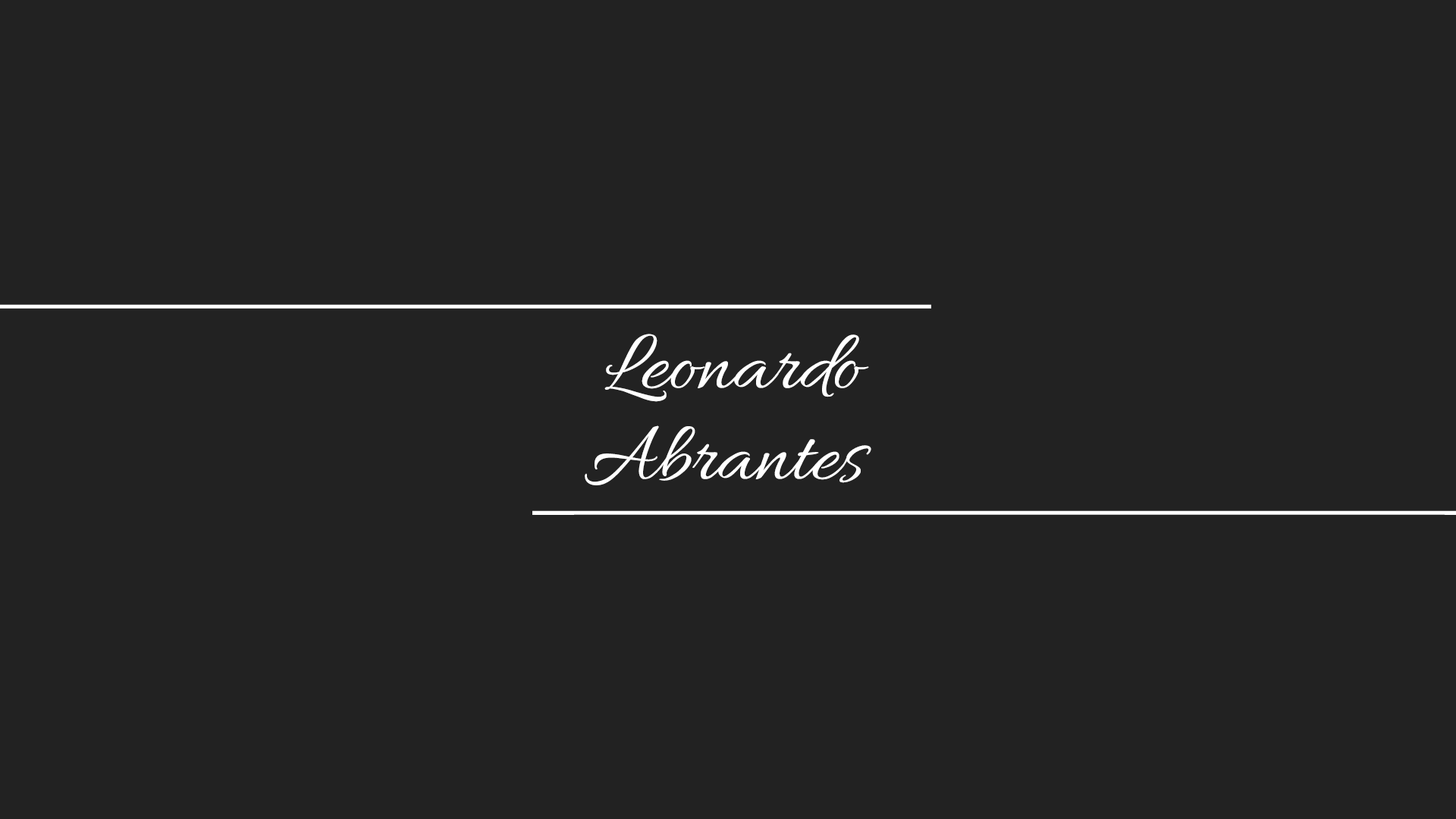
<style>
.page{position:relative;width:1456px;height:819px;background:#222222}
.page>*{position:absolute;margin:0}
.t1{font:86.4px/91px "Allura-Regular";color:#ffffff}
</style>
<div class="page">
<p class="t1" style="left:585px;top:334px;width:286px;height:151px;text-align:center">Leonardo<br>Abrantes</p>
</div>
